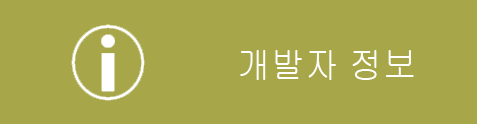
<style>
.page{position:relative;width:477px;height:124px;background:#a7a649}
.page>*{position:absolute;margin:0}
.t1{font:36.7px "Gulim";color:#ffffff;scale:0.91 1}
</style>
<div class="page">
<p class="t1" style="left:240px;top:50px;width:174px;height:30px">개발자 정보</p>
</div>
